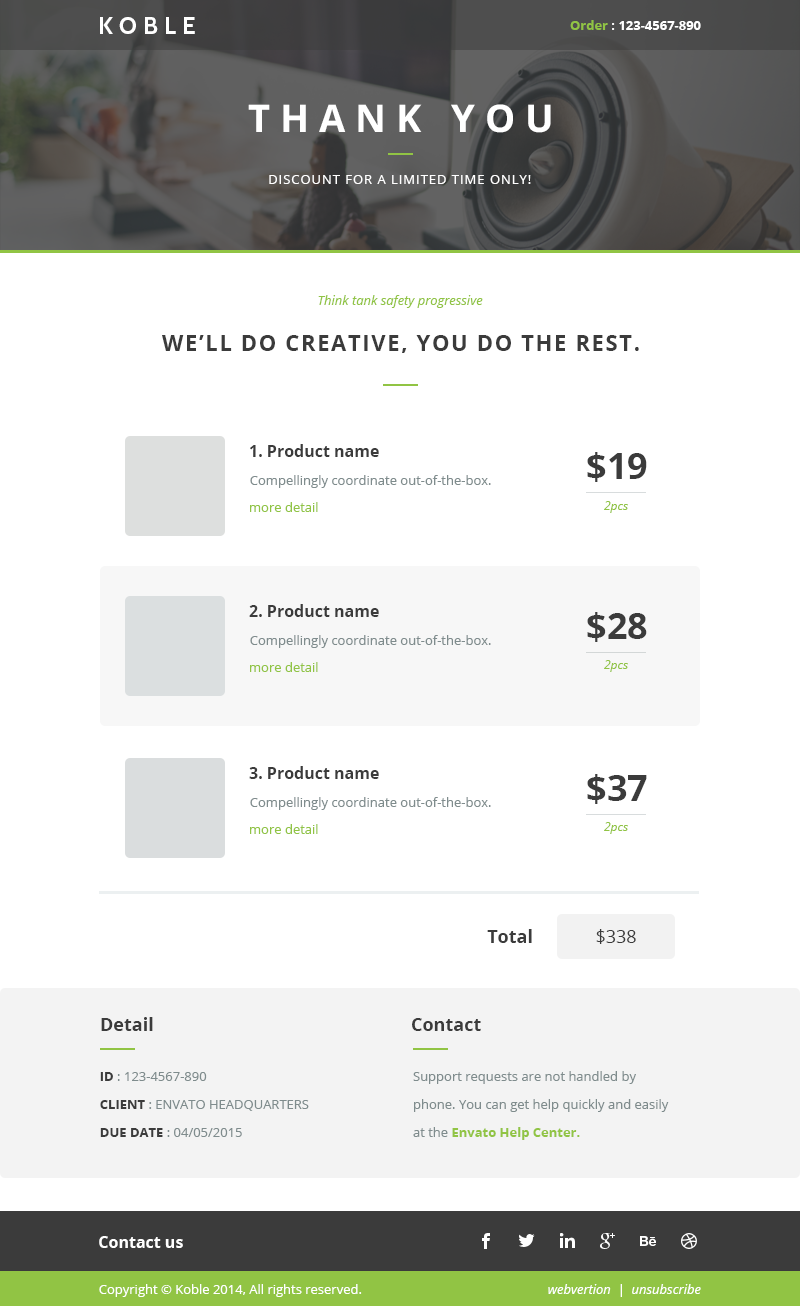
<style>
.page{position:relative;width:800px;height:1306px;background:#ffffff}
.page>*{position:absolute;margin:0}
.t1{font:24px "Cabin-Bold";letter-spacing:0.26em;color:#ffffff;text-transform:uppercase}
.t2{font:13px "OpenSans-Bold";color:#ffffff}
.t3{font:13px "OpenSans-Bold";color:#91c444}
.t4{font:38px "OpenSans-Bold";letter-spacing:0.26em;color:#ffffff;text-transform:uppercase}
.t5{font:13px "OpenSans";letter-spacing:0.075em;color:#ffffff;text-transform:uppercase}
.t6{font:13px "OpenSans-Italic";color:#91c444}
.t7{font:22px "OpenSans-Bold";letter-spacing:0.075em;color:#3b3b3b;text-transform:uppercase}
.t8{font:16px "OpenSans-Bold";color:#3b3b3b}
.t9{font:36px "OpenSans-Bold";color:#3b3b3b}
.t10{font:13px "OpenSans";color:#7f8c8d}
.t11{font:13px "OpenSans";color:#91c444}
.t12{font:12px "OpenSans-Italic";color:#91c444}
.t13{font:18px "OpenSans-Bold";color:#3b3b3b}
.t14{font:18px "OpenSans";color:#3b3b3b}
.t15{font:13px/28px "OpenSans";color:#7f8c8d;text-transform:uppercase}
.t16{font:13px/28px "OpenSans-Bold";color:#3b3b3b;text-transform:uppercase}
.t17{font:13px/28px "OpenSans";color:#7f8c8d}
.t18{font:13px/28px "OpenSans-Bold";color:#91c444}
.t19{font:16px "OpenSans-Bold";color:#ffffff}
.t20{font:13px "OpenSans";color:#ffffff}
.t21{font:13px "OpenSans-Italic";color:#ffffff}
</style>
<div class="page">
<p class="t1" style="left:100px;top:17px;width:95px;height:17px">koble</p>
<p class="t2" style="left:570px;top:20px;width:131px;height:10px"><span class="t3">Order </span>: 123-4567-890</p>
<p class="t4" style="left:248px;top:104px;width:303px;height:29px">Thank you</p>
<p class="t5" style="left:269px;top:175px;width:262px;height:9px">discount for a limited time only!</p>
<p class="t6" style="left:318px;top:295px;width:165px;height:13px">Think tank safety progressive</p>
<p class="t7" style="left:162px;top:335px;width:477px;height:18px">We’ll Do Creative, you Do the Rest.</p>
<p class="t8" style="left:250px;top:444px;width:129px;height:13px">1. Product name</p>
<p class="t9" style="left:587px;top:452px;width:60px;height:30px">$19</p>
<p class="t10" style="left:250px;top:475px;width:241px;height:13px">Compellingly coordinate out-of-the-box.</p>
<p class="t11" style="left:250px;top:502px;width:68px;height:10px">more detail</p>
<p class="t12" style="left:604px;top:501px;width:24px;height:12px">2pcs</p>
<p class="t8" style="left:249px;top:604px;width:130px;height:13px">2. Product name</p>
<p class="t9" style="left:587px;top:612px;width:60px;height:30px">$28</p>
<p class="t10" style="left:250px;top:635px;width:241px;height:13px">Compellingly coordinate out-of-the-box.</p>
<p class="t11" style="left:250px;top:662px;width:68px;height:10px">more detail</p>
<p class="t12" style="left:604px;top:660px;width:24px;height:12px">2pcs</p>
<p class="t8" style="left:249px;top:766px;width:130px;height:13px">3. Product name</p>
<p class="t9" style="left:587px;top:774px;width:60px;height:30px">$37</p>
<p class="t10" style="left:250px;top:797px;width:241px;height:13px">Compellingly coordinate out-of-the-box.</p>
<p class="t12" style="left:604px;top:822px;width:24px;height:12px">2pcs</p>
<p class="t11" style="left:250px;top:824px;width:68px;height:10px">more detail</p>
<p class="t13" style="left:487px;top:929px;width:45px;height:14px">Total</p>
<p class="t14" style="left:596px;top:929px;width:40px;height:15px">$338</p>
<p class="t13" style="left:101px;top:1017px;width:52px;height:14px">Detail</p>
<p class="t13" style="left:412px;top:1018px;width:69px;height:13px">Contact</p>
<p class="t15" style="left:100px;top:1072px;width:209px;height:65px"><span class="t16">ID </span>: 123-4567-890<br><span class="t16">client </span>: Envato Headquarters<br><span class="t16">DUE DATE</span> : 04/05/2015</p>
<p class="t17" style="left:413px;top:1071px;width:256px;height:69px">Support requests are not handled by phone. You can get help quickly and easily at the <span class="t18">Envato Help Center.</span></p>
<p class="t19" style="left:99px;top:1236px;width:84px;height:12px">Contact us</p>
<p class="t20" style="left:99px;top:1284px;width:263px;height:13px">Copyright © Koble 2014, All rights reserved.</p>
<p class="t21" style="left:548px;top:1284px;width:153px;height:13px">webvertion  |  unsubscribe</p>
</div>
